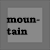
<style>
.page{position:relative;width:50px;height:50px;background:#707070}
.page>*{position:absolute;margin:0}
.t1{font:10px "URWBookman-Demi";color:#000000}
</style>
<div class="page">
<p class="t1" style="left:6px;top:17px;width:34px;height:18px">mountain</p>
</div>
